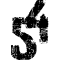
<style>
.page{position:relative;width:60px;height:60px;background:#ffffff}
.page>*{position:absolute;margin:0}
.t1{font:60px "28DaysLater";color:#000000}
</style>
<div class="page">
<p class="t1" style="left:25px;top:0px;width:24px;height:44px">4</p>
<p class="t1" style="left:11px;top:17px;width:26px;height:44px">%5</p>
</div>
